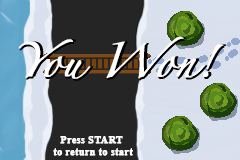
<style>
.page{position:relative;width:240px;height:160px;background:#252525}
.page>*{position:absolute;margin:0}
.t1{font:10.4px "TimesNewRomanPS-BoldMT";color:#ffffff;font-weight:bold}
</style>
<div class="page">
<p class="t1" style="left:53px;top:136px;width:80px;height:20px;text-align:center">Press START <br>to return to start</p>
</div>
